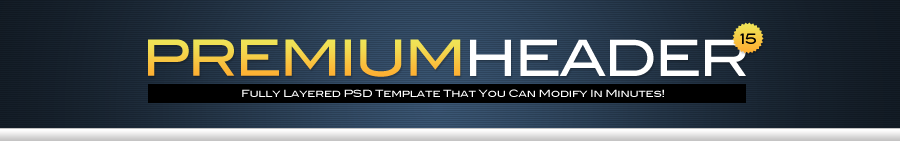
<style>
.page{position:relative;width:900px;height:141px}
.page>*{position:absolute;margin:0}
.t1{font:50px "BlairMdITCTTMedium";letter-spacing:-0.05em;color:#f5ce47;text-transform:uppercase}
.t2{font:50px "BlairMdITCTTMedium";letter-spacing:-0.05em;color:#ffffff;text-transform:uppercase}
.t3{font:14px "BlairMdITCTTMedium";letter-spacing:-0.05em;color:#000000;text-transform:uppercase}
.t4{font:10px "BlairMdITCTTMedium";letter-spacing:-0.025em;color:#ffffff}
</style>
<div class="page">
<p class="t1" style="left:148px;top:39px;width:313px;height:38px">Premium</p>
<p class="t2" style="left:470px;top:39px;width:276px;height:37px">Header</p>
<p class="t3" style="left:740px;top:33px;width:16px;height:11px">15</p>
<p class="t4" style="left:242px;top:89px;width:422px;height:8px">Fully Layered PSD Template That You Can Modify In Minutes!</p>
</div>
